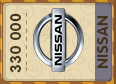
<style>
.page{position:relative;width:116px;height:84px;background:#eadab4}
.page>*{position:absolute;margin:0}
.t1{font:15px "RotondaC-Bold";letter-spacing:0.04em;color:#43341d;text-transform:uppercase}
</style>
<div class="page">
<p class="t1" style="left:10px;top:13px;width:11px;height:60px;rotate:-90deg">330 000</p>
<p class="t1" style="left:97px;top:16px;width:11px;height:52px;rotate:-90deg">nissan</p>
</div>
